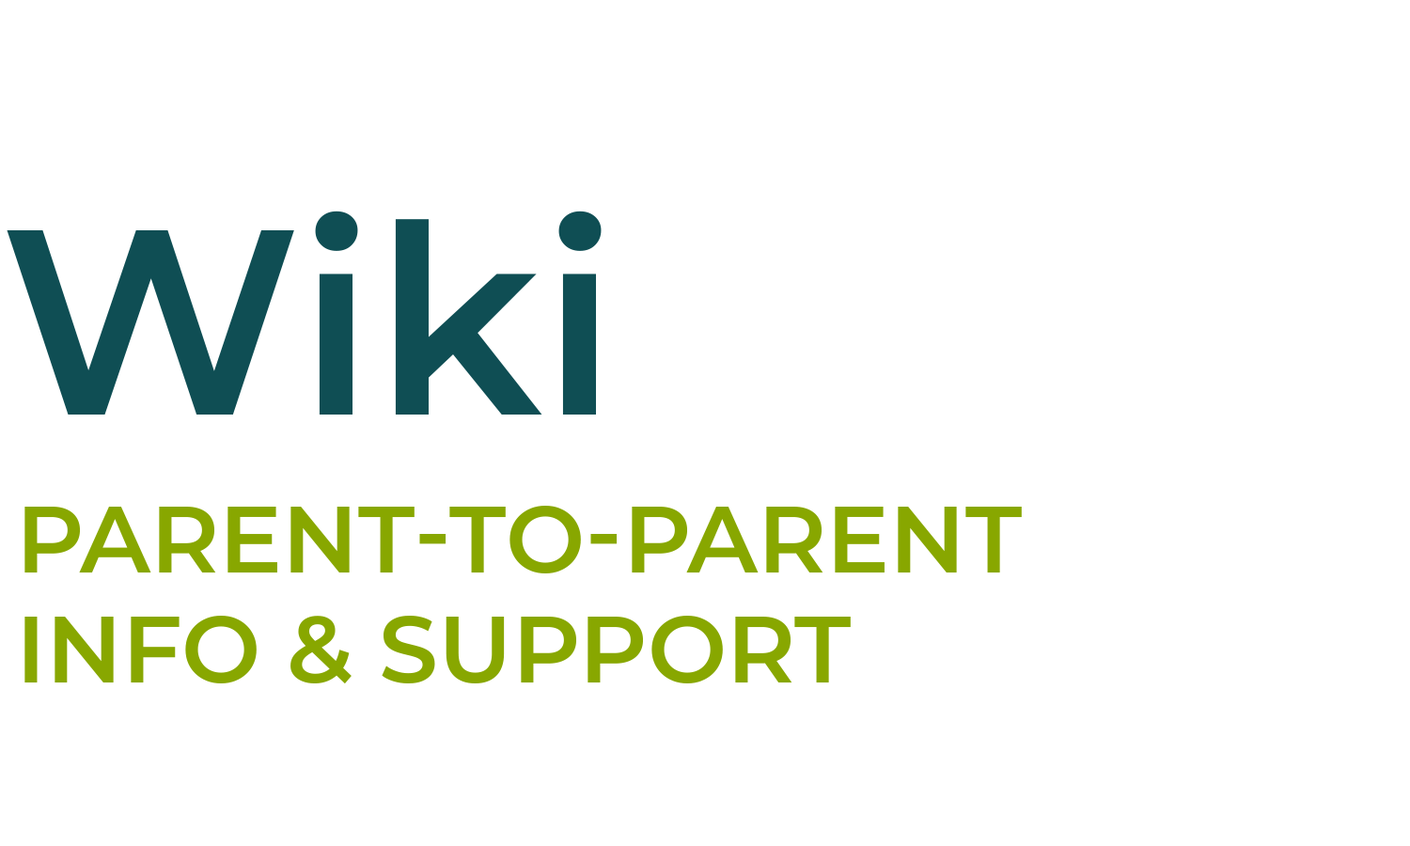
<style>
.page{position:relative;width:1410px;height:846px;background:#ffffff}
.page>*{position:absolute;margin:0}
.t1{font:263.1px "Montserrat-SemiBold";color:#0f4e54}
.t2{font:94px/0.2px "Montserrat-SemiBold";color:#88a700;text-transform:uppercase}
</style>
<div class="page">
<p class="t1" style="left:7px;top:211px;width:594px;height:203px">Wiki</p>
<p class="t2" style="left:24px;top:506px;width:998px;height:178px">parent-to-parent<br>info &amp; support</p>
</div>
